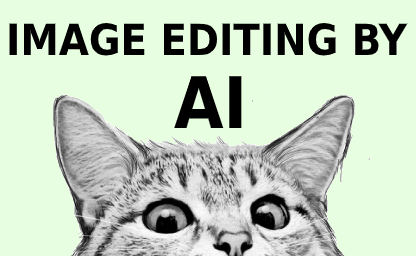
<style>
.page{position:relative;width:416px;height:256px;background:#e7ffe0}
.page>*{position:absolute;margin:0}
.t1{font:43px "DejaVuSansCondensed-Bold";color:#000000}
.t2{font:71px "DejaVuSansCondensed-Bold";color:#000000}
</style>
<div class="page">
<p class="t1" style="left:9px;top:23px;width:399px;height:33px">IMAGE EDITING BY</p>
<p class="t2" style="left:174px;top:76px;width:68px;height:52px">AI</p>
</div>
